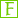
<style>
.page{position:relative;width:18px;height:18px;background:#ffffff}
.page>*{position:absolute;margin:0}
.t1{font:18px "Calligraphic421BT-RomanB";color:#6ecc00}
</style>
<div class="page">
<p class="t1" style="left:5px;top:2px;width:9px;height:14px">F</p>
</div>
